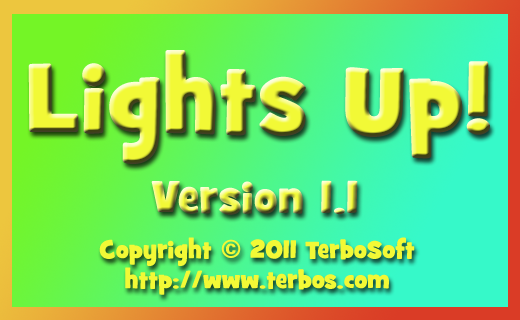
<style>
.page{position:relative;width:520px;height:320px}
.page>*{position:absolute;margin:0}
.t1{font:100px "GrilledCheeseBTNToasted"}
.t2{font:45.8px "GrilledCheeseBTNToasted"}
.t3{font:25px "GrilledCheeseBTNToasted";color:#f2f936}
</style>
<div class="page">
<p class="t1" style="left:28px;top:50px;width:462px;height:114px">Lights Up!</p>
<p class="t2" style="left:151px;top:180px;width:207px;height:35px">Version 1.1</p>
<p class="t3" style="left:99px;top:237px;width:316px;height:58px;text-align:center">Copyright © 2011 TerboSoft<br>http://www.terbos.com</p>
</div>
